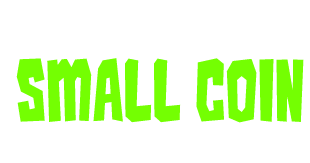
<style>
.page{position:relative;width:310px;height:163px;background:#ffffff}
.page>*{position:absolute;margin:0}
.t1{font:76.1px "Kaiju-Monster__G";color:#74ff02}
</style>
<div class="page">
<p class="t1" style="left:16px;top:58px;width:288px;height:65px">Small Coin</p>
</div>
